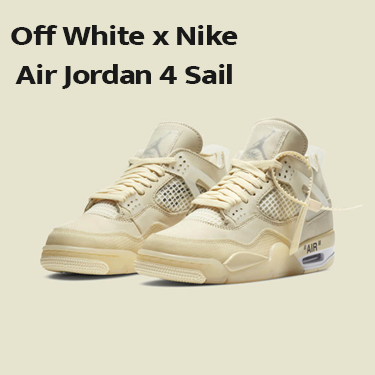
<style>
.page{position:relative;width:375px;height:375px;background:#e6e4cf}
.page>*{position:absolute;margin:0}
.t1{font:28.9px "Mukta-ExtraBold";letter-spacing:-0.025em;color:#191919;scale:1.14 1}
</style>
<div class="page">
<p class="t1" style="left:11px;top:25px;width:227px;height:64px;text-align:center">Off White x Nike<br>Air Jordan 4 Sail</p>
</div>
